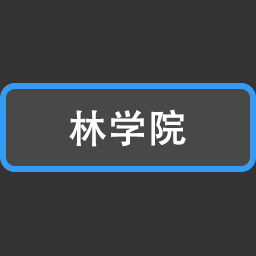
<style>
.page{position:relative;width:256px;height:256px;background:#333333}
.page>*{position:absolute;margin:0}
.t1{font:39px "AdobeHeitiStd-Regular";color:#ffffff;font-weight:bold}
</style>
<div class="page">
<p class="t1" style="left:69px;top:109px;width:117px;height:38px">林学院</p>
</div>
